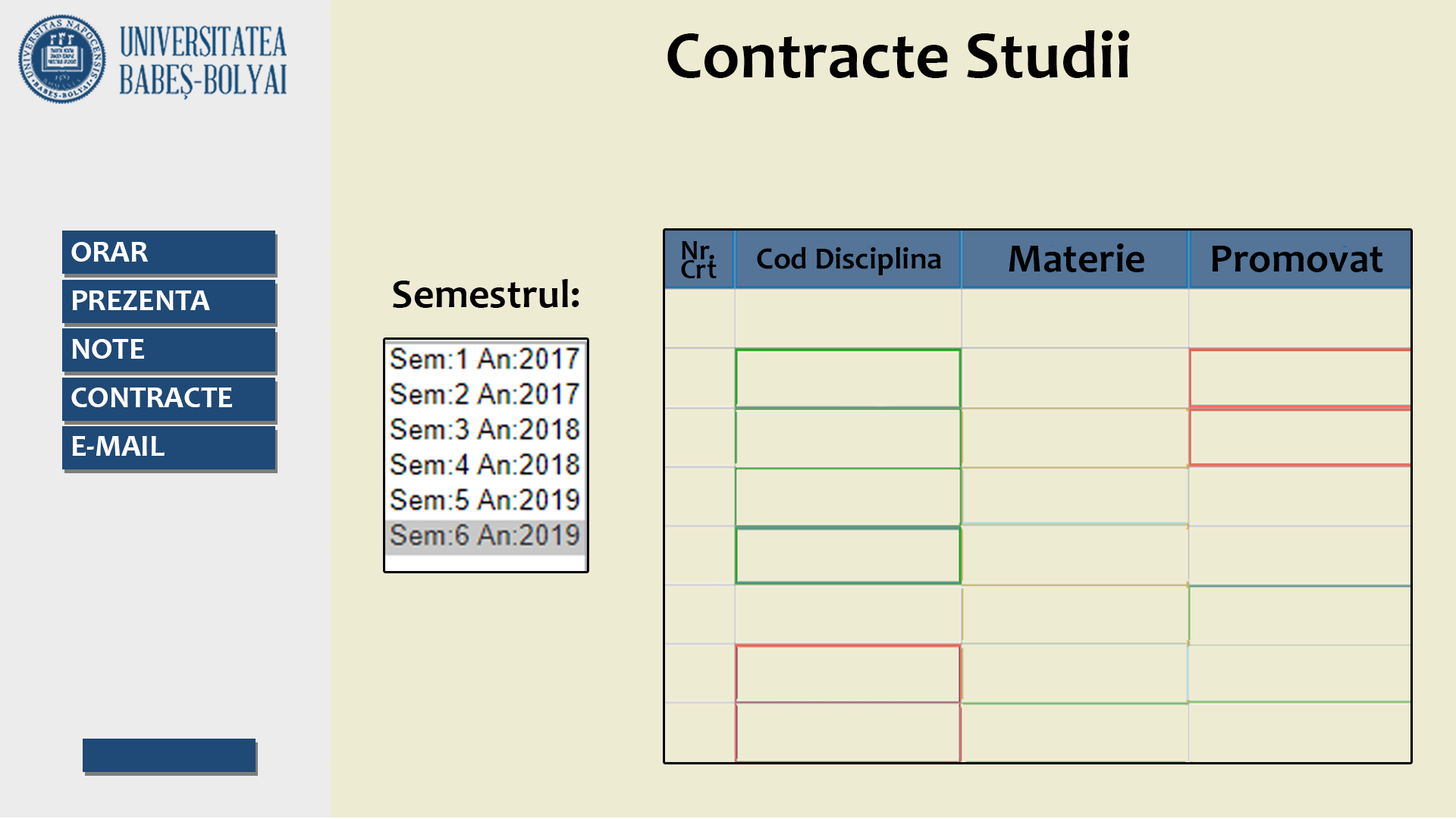
<style>
.page{position:relative;width:1456px;height:819px;background:#eeebd3}
.page>*{position:absolute;margin:0}
.t1{font:67.5px "Candara-Bold";color:#000000}
.t2{font:30px/48.4px "Candara-Bold";color:#ffffff;scale:1.03 1}
.t3{font:28.4px/18.9px "Candara-Bold";color:#000000}
.t4{font:41.1px "Candara-Bold";color:#000000}
.t5{font:30.9px "Candara-Bold";color:#000000}
</style>
<div class="page">
<p class="t1" style="left:667px;top:30px;width:463px;height:48px">Contracte Studii</p>
<p class="t2" style="left:71px;top:242px;width:162px;height:214px">ORAR<br>PREZENTA<br>NOTE<br>CONTRACTE<br>E-MAIL</p>
<p class="t3" style="left:681px;top:241px;width:36px;height:37px">Nr.<br>Crt</p>
<p class="t4" style="left:1009px;top:243px;width:135px;height:29px">Materie</p>
<p class="t4" style="left:1212px;top:246px;width:171px;height:26px">Promovat</p>
<p class="t5" style="left:757px;top:246px;width:184px;height:29px">Cod Disciplina</p>
<p class="t4" style="left:393px;top:279px;width:186px;height:29px">Semestrul:</p>
</div>
